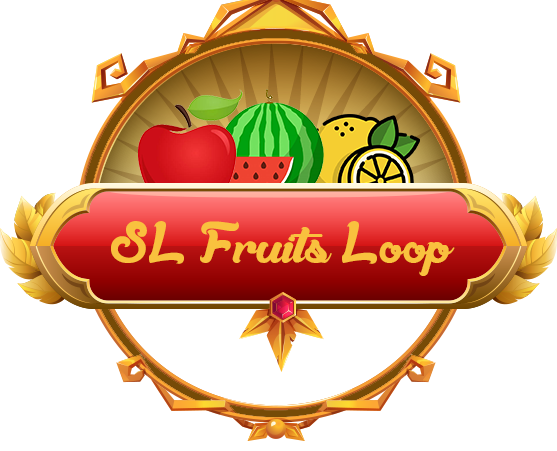
<style>
.page{position:relative;width:557px;height:451px;background:#ffffff}
.page>*{position:absolute;margin:0}
.t1{font:60px "AmandesSales";color:#f9c13e}
</style>
<div class="page">
<p class="t1" style="left:111px;top:221px;width:344px;height:55px">SL Fruits Loop</p>
</div>
